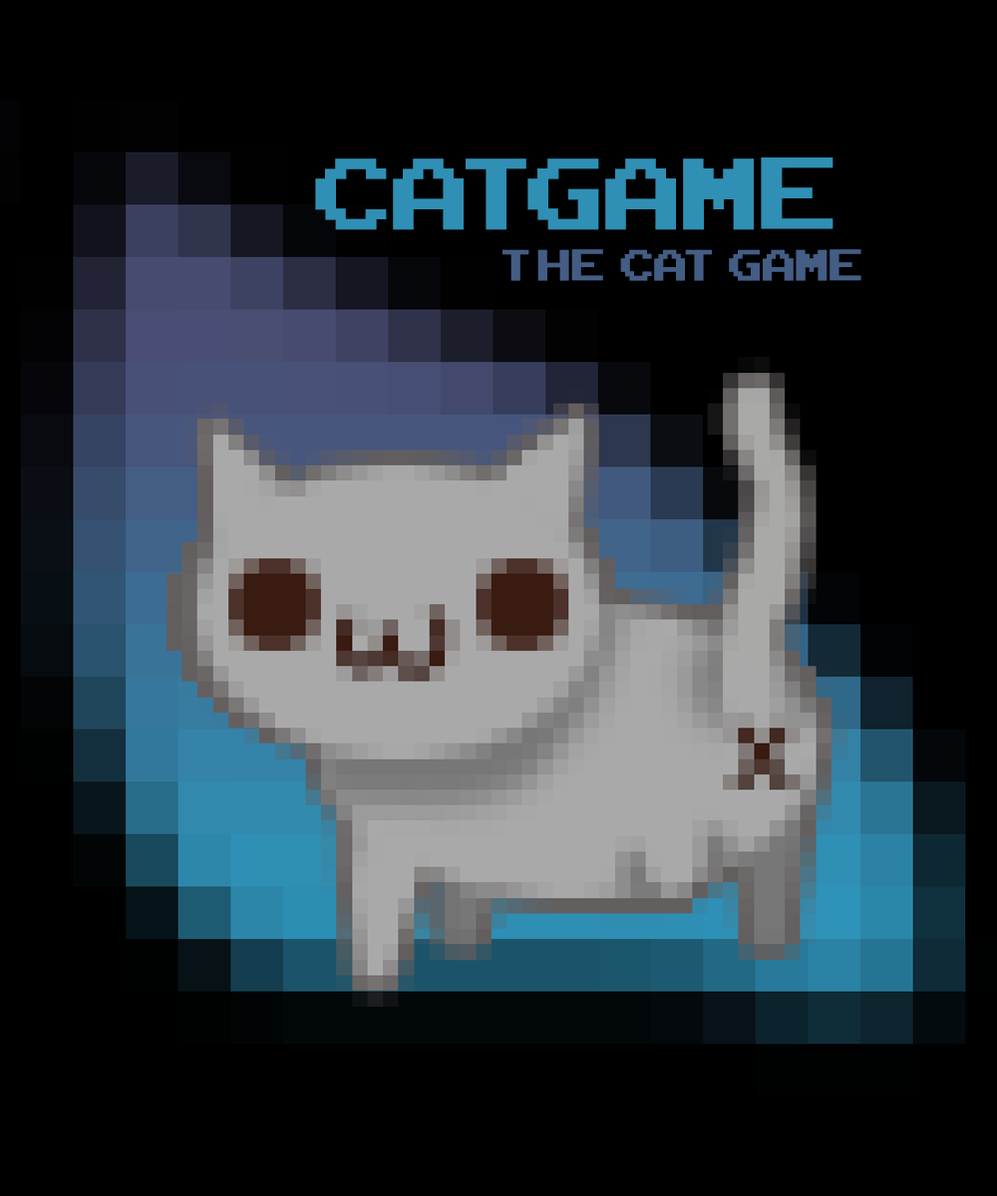
<style>
.page{position:relative;width:997px;height:1196px;background:#000000}
.page>*{position:absolute;margin:0}
.t1{font:141.2px "ArcadeClassic";color:#308fb4}
.t2{font:60.9px "ArcadeClassic";color:#445d84}
</style>
<div class="page">
<p class="t1" style="left:315px;top:158px;width:211px;height:72px">CaT</p>
<p class="t1" style="left:527px;top:158px;width:306px;height:72px">Game</p>
<p class="t2" style="left:502px;top:249px;width:359px;height:32px">the  cat game</p>
</div>
